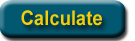
<style>
.page{position:relative;width:135px;height:41px;background:#035871}
.page>*{position:absolute;margin:0}
.t1{font:20px "Arial-BoldMT";color:#f3cf08;scale:0.92 1}
</style>
<div class="page">
<p class="t1" style="left:21px;top:10px;width:81px;height:16px">Calculate</p>
</div>
